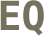
<style>
.page{position:relative;width:45px;height:36px;background:#ffffff}
.page>*{position:absolute;margin:0}
.t1{font:40px "Menlo-Bold";color:#75715e}
</style>
<div class="page">
<p class="t1" style="left:0px;top:0px;width:44px;height:36px">EQ</p>
</div>
